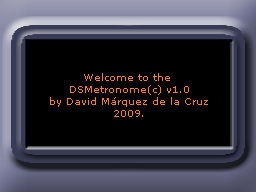
<style>
.page{position:relative;width:256px;height:192px;background:#000000}
.page>*{position:absolute;margin:0}
.t1{font:10px "MSReferenceSansSerif";color:#ff8400}
</style>
<div class="page">
<p class="t1" style="left:50px;top:73px;width:158px;height:44px;text-align:center">Welcome to the <br>DSMetronome(c) v1.0<br>by David Márquez de la Cruz<br>2009.</p>
</div>
